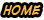
<style>
.page{position:relative;width:44px;height:20px;background:#000000}
.page>*{position:absolute;margin:0}
.t1{font:10px "DigitalStripBold";color:#febc3a}
</style>
<div class="page">
<p class="t1" style="left:3px;top:5px;width:38px;height:10px">Home</p>
</div>
